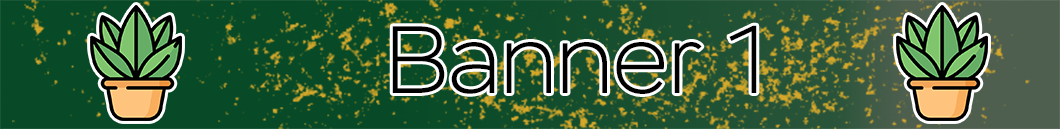
<style>
.page{position:relative;width:1060px;height:129px}
.page>*{position:absolute;margin:0}
.t1{font:95.5px "Stem-ExtraLight";color:#000000}
</style>
<div class="page">
<p class="t1" style="left:392px;top:25px;width:365px;height:69px">Banner 1</p>
</div>
